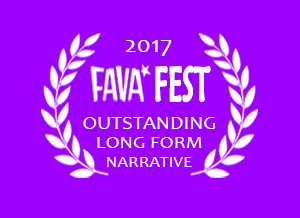
<style>
.page{position:relative;width:300px;height:218px;background:#9b01fd}
.page>*{position:absolute;margin:0}
.t1{font:24px "Candara";color:#fefefe;scale:1.09 1}
.t2{font:47.5px "MaiandraGD-Regular";color:#fffefe;font-weight:bold;scale:0.55 1}
.t3{font:19.2px "Candara";color:#fffefe;scale:1.09 1}
.t4{font:18.4px "Candara";color:#fffefe;scale:1.09 1}
.t5{font:16px "Candara";color:#fffefe;scale:1.09 1}
</style>
<div class="page">
<p class="t1" style="left:125px;top:40px;width:47px;height:16px">2017</p>
<p class="t2" style="left:155px;top:65px;width:56px;height:38px">FEST</p>
<p class="t3" style="left:83px;top:117px;width:132px;height:12px">OUTSTANDING</p>
<p class="t4" style="left:97px;top:137px;width:105px;height:11px">LONG FORM</p>
<p class="t5" style="left:107px;top:157px;width:85px;height:10px">NARRATIVE</p>
</div>
